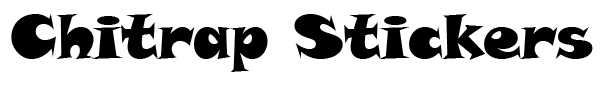
<style>
.page{position:relative;width:609px;height:86px;background:#ffffff}
.page>*{position:absolute;margin:0}
.t1{font:60px "SnapITC-Regular";color:#000000}
</style>
<div class="page">
<p class="t1" style="left:11px;top:14px;width:582px;height:58px">Chitrap Stickers</p>
</div>
